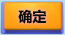
<style>
.page{position:relative;width:65px;height:35px}
.page>*{position:absolute;margin:0}
.t1{font:14px "MicrosoftYaHei-Bold";color:#0c0d0f}
</style>
<div class="page">
<p class="t1" style="left:18px;top:9px;width:29px;height:15px">确定</p>
</div>
